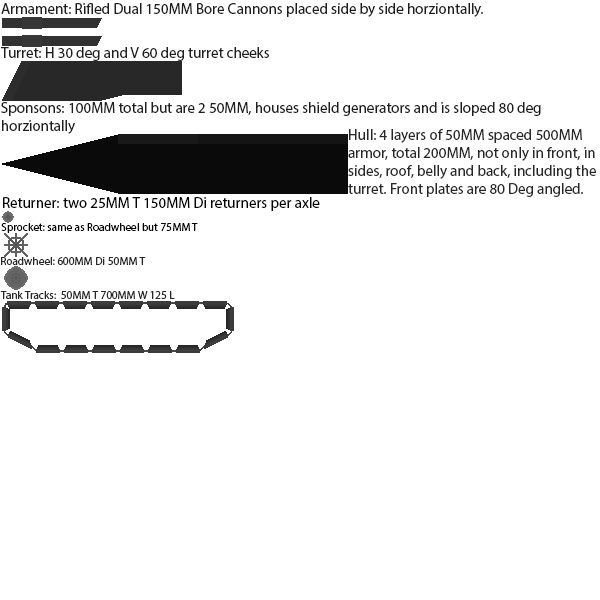
<style>
.page{position:relative;width:600px;height:600px;background:#ffffff}
.page>*{position:absolute;margin:0}
.t1{font:15px "MyriadPro-Regular";color:#1e1e1e}
.t2{font:15px "MyriadPro-Regular";color:#282828}
.t3{font:15px "MyriadPro-Regular";color:#000000}
.t4{font:11.2px "MyriadPro-Regular";color:#000000}
.t5{font:11.2px "MyriadPro-Regular";color:#282828}
</style>
<div class="page">
<p class="t1" style="left:1px;top:3px;width:482px;height:14px">Armament: Rifled Dual 150MM Bore Cannons placed side by side horziontally.</p>
<p class="t1" style="left:1px;top:47px;width:268px;height:14px">Turret: H 30 deg and V 60 deg turret cheeks</p>
<p class="t1" style="left:1px;top:102px;width:540px;height:32px">Sponsons: 100MM total but are 2 50MM, houses shield generators and is sloped 80 deg<br>horziontally</p>
<p class="t2" style="left:348px;top:129px;width:248px;height:68px">Hull: 4 layers of 50MM spaced 500MM<br>armor, total 200MM, not only in front, in<br>sides, roof, belly and back, including the<br>turret. Front plates are 80 Deg angled.</p>
<p class="t3" style="left:3px;top:197px;width:317px;height:14px">Returner: two 25MM T 150MM Di returners per axle</p>
<p class="t4" style="left:1px;top:223px;width:197px;height:10px">Sprocket: same as Roadwheel but 75MM T</p>
<p class="t5" style="left:1px;top:257px;width:145px;height:8px">Roadwheel: 600MM Di 50MM T</p>
<p class="t5" style="left:0px;top:291px;width:175px;height:8px">Tank Tracks:  50MM T 700MM W 125 L</p>
</div>
